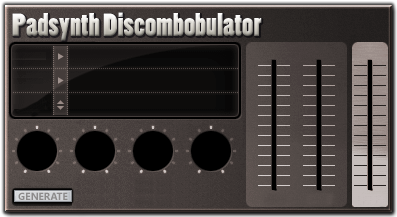
<style>
.page{position:relative;width:397px;height:217px}
.page>*{position:absolute;margin:0}
.t1{font:30px "PoplarStd"}
.t2{font:10px "SegoeUI-Bold";color:#8c8a8a}
</style>
<div class="page">
<p class="t1" style="left:12px;top:12px;width:250px;height:29px">Padsynth Discombobulator</p>
<p class="t2" style="left:18px;top:192px;width:50px;height:8px">GENERATE</p>
</div>
